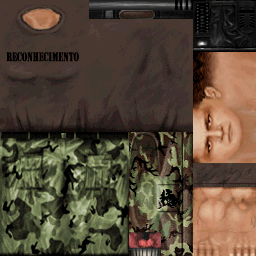
<style>
.page{position:relative;width:256px;height:256px}
.page>*{position:absolute;margin:0}
.t1{font:13.3px "Army";letter-spacing:-0.02em;color:#000000;text-transform:uppercase;font-weight:bold;scale:0.62 1}
</style>
<div class="page">
<p class="t1" style="left:6px;top:52px;width:73px;height:10px">reconhecimento</p>
</div>
